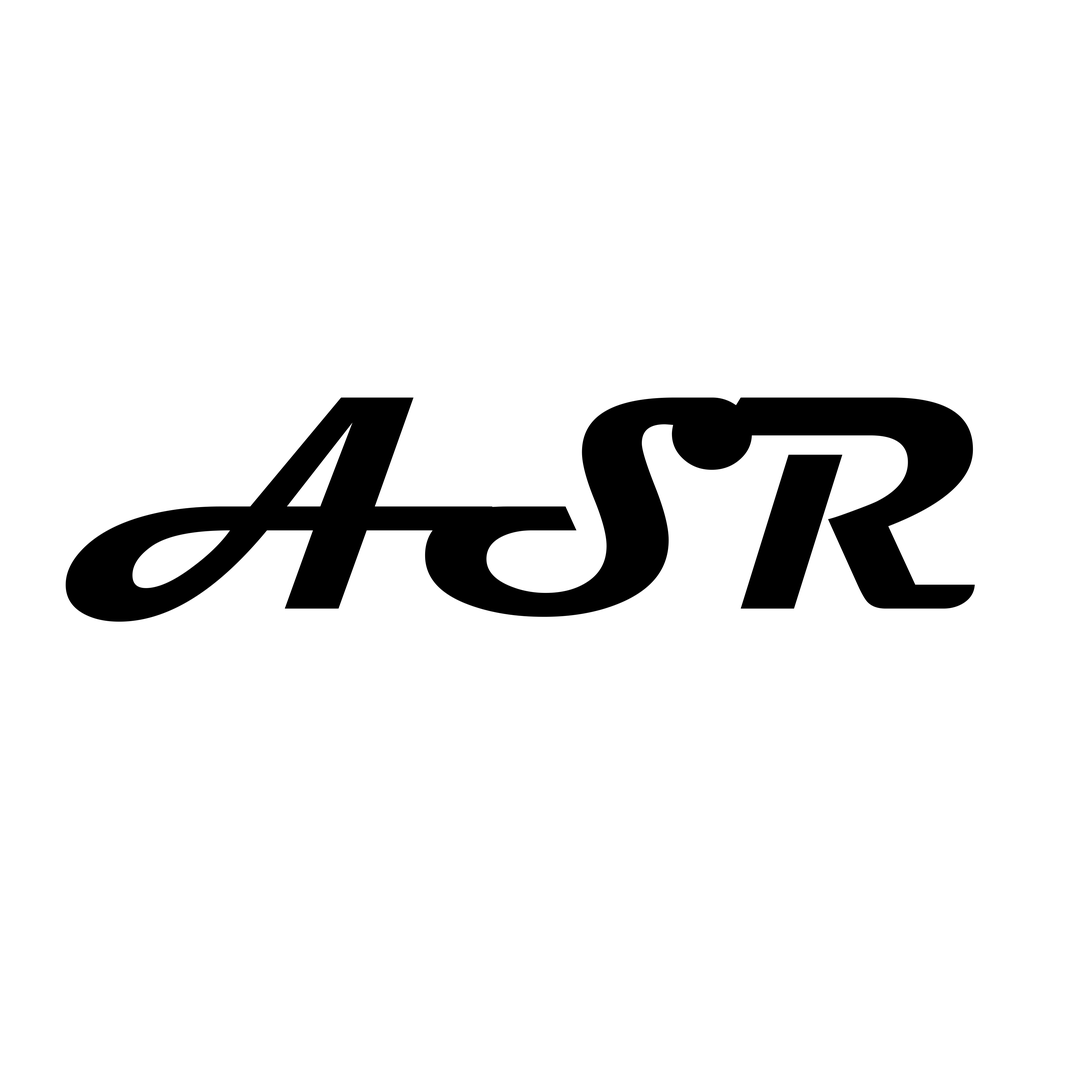
<style>
.page{position:relative;width:1092px;height:1092px;background:#ffffff}
.page>*{position:absolute;margin:0}
.t1{font:307.1px "Magneto-Bold";color:#000000}
</style>
<div class="page">
<p class="t1" style="left:66px;top:398px;width:909px;height:224px">ASR</p>
</div>
